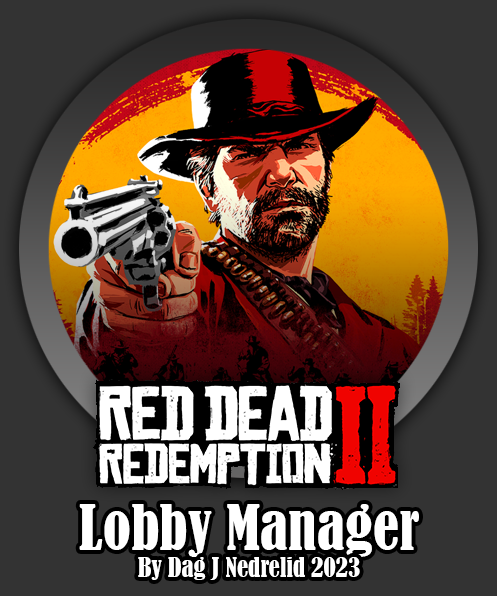
<style>
.page{position:relative;width:497px;height:596px;background:#333333}
.page>*{position:absolute;margin:0}
.t1{font:58.3px "BernardMT-Condensed";color:#ffffff}
.t2{font:25px "BernardMT-Condensed";color:#ffffff}
</style>
<div class="page">
<p class="t1" style="left:79px;top:504px;width:340px;height:53px">Lobby Manager</p>
<p class="t2" style="left:138px;top:557px;width:222px;height:23px">By Dag J Nedrelid 2023</p>
</div>
